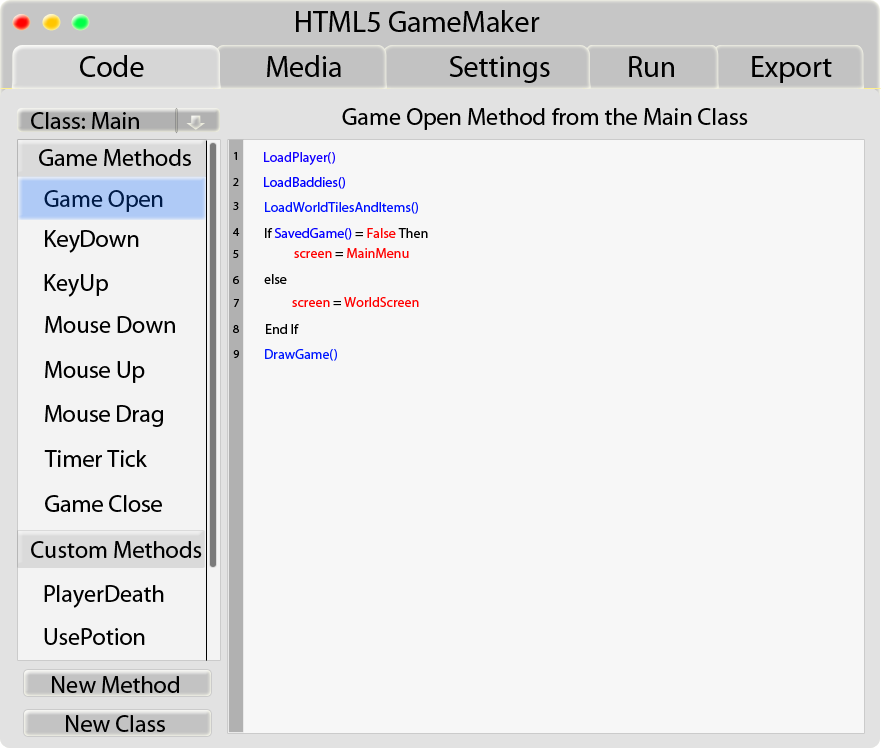
<style>
.page{position:relative;width:881px;height:748px;background:#f7f7f7}
.page>*{position:absolute;margin:0}
.t1{font:30px "MyriadPro-Regular";color:#000000}
.t2{font:24px "MyriadPro-Regular";color:#000000}
.t3{font:12px "MyriadPro-Regular";color:#000000}
.t4{font:14px "MyriadPro-Regular";color:#1200ff}
.t5{font:14px "MyriadPro-Regular";color:#0000ff}
.t6{font:24px "MyriadPro-Regular";color:#001b47}
.t7{font:14px "MyriadPro-Regular";color:#0012ff}
.t8{font:14px "MyriadPro-Regular";color:#0600ff}
.t9{font:14px "MyriadPro-Regular";color:#000000}
.t10{font:14px "MyriadPro-Regular";color:#ff0000}
.t11{font:14px "MyriadPro-Regular";color:#0018ff}
</style>
<div class="page">
<p class="t1" style="left:296px;top:10px;width:244px;height:22px">HTML5 GameMaker</p>
<p class="t1" style="left:80px;top:55px;width:64px;height:22px">Code</p>
<p class="t1" style="left:267px;top:55px;width:74px;height:22px">Media</p>
<p class="t1" style="left:449px;top:56px;width:101px;height:27px">Settings</p>
<p class="t1" style="left:629px;top:56px;width:45px;height:21px">Run</p>
<p class="t1" style="left:752px;top:56px;width:80px;height:27px">Export</p>
<p class="t2" style="left:31px;top:112px;width:108px;height:17px">Class: Main</p>
<p class="t2" style="left:342px;top:108px;width:406px;height:22px">Game Open Method from the Main Class</p>
<p class="t2" style="left:39px;top:149px;width:152px;height:17px">Game Methods</p>
<p class="t3" style="left:234px;top:152px;width:3px;height:8px">1</p>
<p class="t4" style="left:264px;top:152px;width:71px;height:13px">LoadPlayer()</p>
<p class="t3" style="left:233px;top:178px;width:6px;height:8px">2</p>
<p class="t5" style="left:264px;top:177px;width:81px;height:12px">LoadBaddies()</p>
<p class="t6" style="left:44px;top:190px;width:119px;height:22px">Game Open</p>
<p class="t3" style="left:233px;top:202px;width:6px;height:8px">3</p>
<p class="t7" style="left:265px;top:202px;width:153px;height:12px">LoadWorldTilesAndItems()</p>
<p class="t2" style="left:45px;top:230px;width:94px;height:23px">KeyDown</p>
<p class="t3" style="left:233px;top:228px;width:7px;height:8px">4</p>
<p class="t8" style="left:265px;top:228px;width:163px;height:12px"><span class="t9">If </span>SavedGame()<span class="t9"> = </span><span class="t10">False </span><span class="t9">Then</span></p>
<p class="t3" style="left:233px;top:250px;width:6px;height:8px">5</p>
<p class="t10" style="left:294px;top:248px;width:115px;height:10px">screen <span class="t9">= </span>MainMenu</p>
<p class="t2" style="left:44px;top:274px;width:64px;height:23px">KeyUp</p>
<p class="t3" style="left:233px;top:276px;width:6px;height:8px">6</p>
<p class="t9" style="left:264px;top:274px;width:23px;height:10px">else</p>
<p class="t3" style="left:233px;top:299px;width:6px;height:8px">7</p>
<p class="t10" style="left:292px;top:297px;width:127px;height:10px">screen <span class="t9">= </span>WorldScreen</p>
<p class="t2" style="left:45px;top:316px;width:130px;height:17px">Mouse Down</p>
<p class="t3" style="left:233px;top:325px;width:6px;height:8px">8</p>
<p class="t9" style="left:266px;top:324px;width:33px;height:10px">End If</p>
<p class="t3" style="left:233px;top:350px;width:6px;height:8px">9</p>
<p class="t11" style="left:265px;top:349px;width:72px;height:12px">DrawGame()</p>
<p class="t2" style="left:45px;top:361px;width:100px;height:22px">Mouse Up</p>
<p class="t2" style="left:45px;top:405px;width:118px;height:22px">Mouse Drag</p>
<p class="t2" style="left:44px;top:450px;width:103px;height:17px">Timer Tick</p>
<p class="t2" style="left:45px;top:495px;width:117px;height:17px">Game Close</p>
<p class="t2" style="left:31px;top:541px;width:171px;height:17px">Custom Methods</p>
<p class="t2" style="left:44px;top:585px;width:120px;height:23px">PlayerDeath</p>
<p class="t2" style="left:44px;top:628px;width:101px;height:17px">UsePotion</p>
<p class="t2" style="left:52px;top:676px;width:127px;height:17px">New Method</p>
<p class="t2" style="left:66px;top:715px;width:99px;height:17px">New Class</p>
</div>
